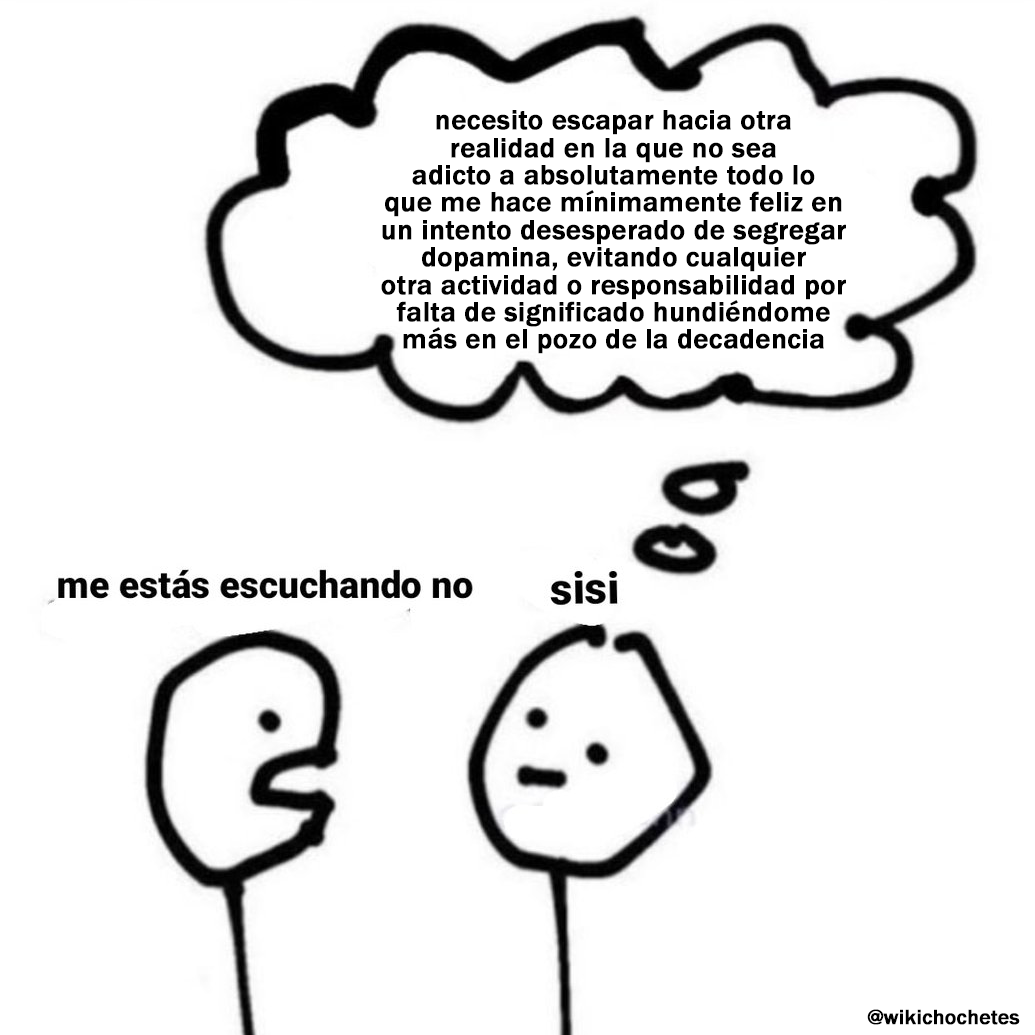
<style>
.page{position:relative;width:1035px;height:1035px;background:#ffffff}
.page>*{position:absolute;margin:0}
.t1{font:28.6px "FranklinGothic-Medium";color:#000000;font-weight:bold}
.t2{font:21.2px "FranklinGothic-Medium";color:#000000;font-weight:bold}
</style>
<div class="page">
<p class="t1" style="left:381px;top:110px;width:465px;height:244px;text-align:center">necesito escapar hacia otra<br>realidad en la que no sea<br>adicto a absolutamente todo lo<br>que me hace mínimamente feliz en<br>un intento desesperado de segregar<br>dopamina, evitando cualquier<br>otra actividad o responsabilidad por<br>falta de significado hundiéndome<br>más en el pozo de la decadencia</p>
<p class="t2" style="left:867px;top:1009px;width:153px;height:16px">@wikichochetes</p>
</div>
